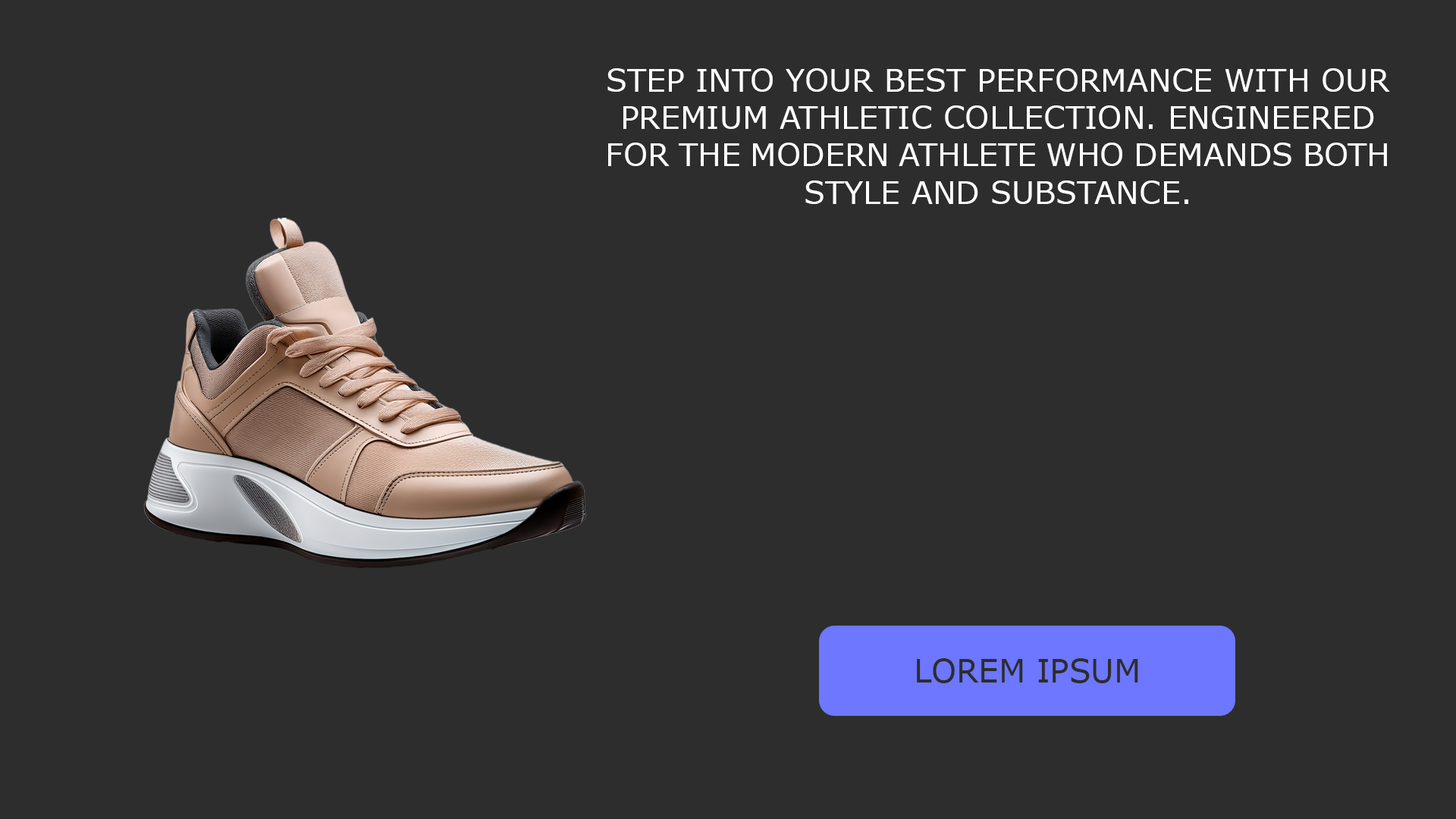
<style>
.page{position:relative;width:1456px;height:819px;background:#2d2d2d}
.page>*{position:absolute;margin:0}
.t1{font:31.1px "Verdana";color:#ffffff;text-transform:uppercase}
.t2{font:31.7px "Verdana";color:#2d2d2d;text-transform:uppercase}
</style>
<div class="page">
<p class="t1" style="left:607px;top:68px;width:783px;height:136px;text-align:center">Step into your best performance with our premium athletic collection. Engineered for the modern athlete who demands both style and substance.</p>
<p class="t2" style="left:917px;top:658px;width:221px;height:25px">Lorem Ipsum</p>
</div>
